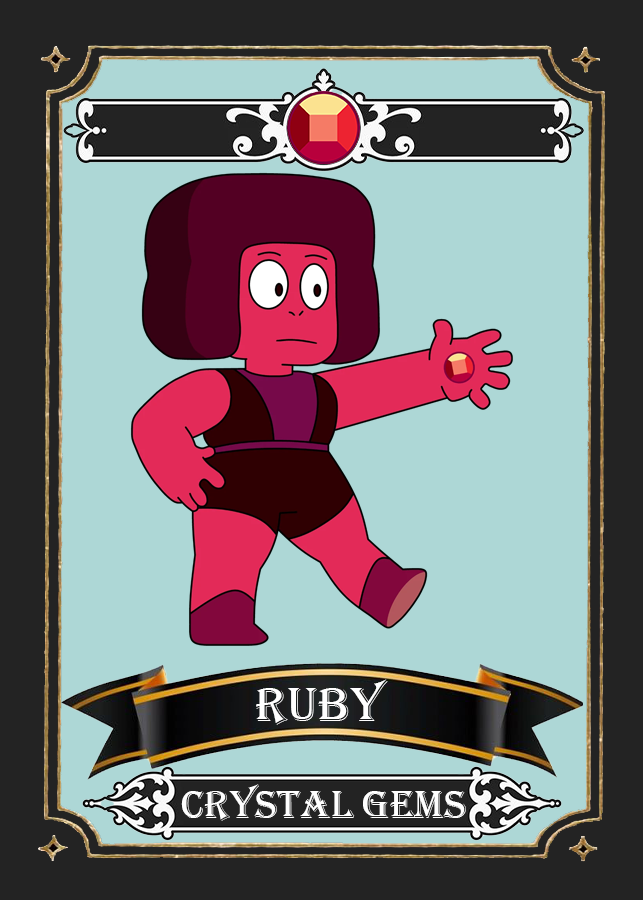
<style>
.page{position:relative;width:643px;height:900px;background:#add7d6}
.page>*{position:absolute;margin:0}
.t1{font:50.5px "Algerian";color:#ffffff}
.t2{font:39.9px "Algerian";color:#ffffff}
</style>
<div class="page">
<p class="t1" style="left:256px;top:679px;width:132px;height:46px">ruby</p>
<p class="t2" style="left:181px;top:784px;width:285px;height:37px">Crystal Gems</p>
</div>
